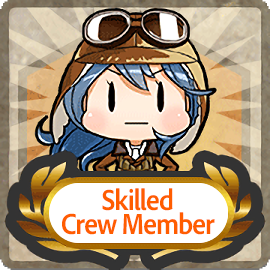
<style>
.page{position:relative;width:270px;height:270px}
.page>*{position:absolute;margin:0}
.t1{font:30px/24px "AdobeClean-Bold";letter-spacing:-0.04em;color:#ff5d00;scale:0.9 1}
</style>
<div class="page">
<p class="t1" style="left:62px;top:188px;width:153px;height:47px;text-align:center">Skilled<br>Crew Member</p>
</div>
